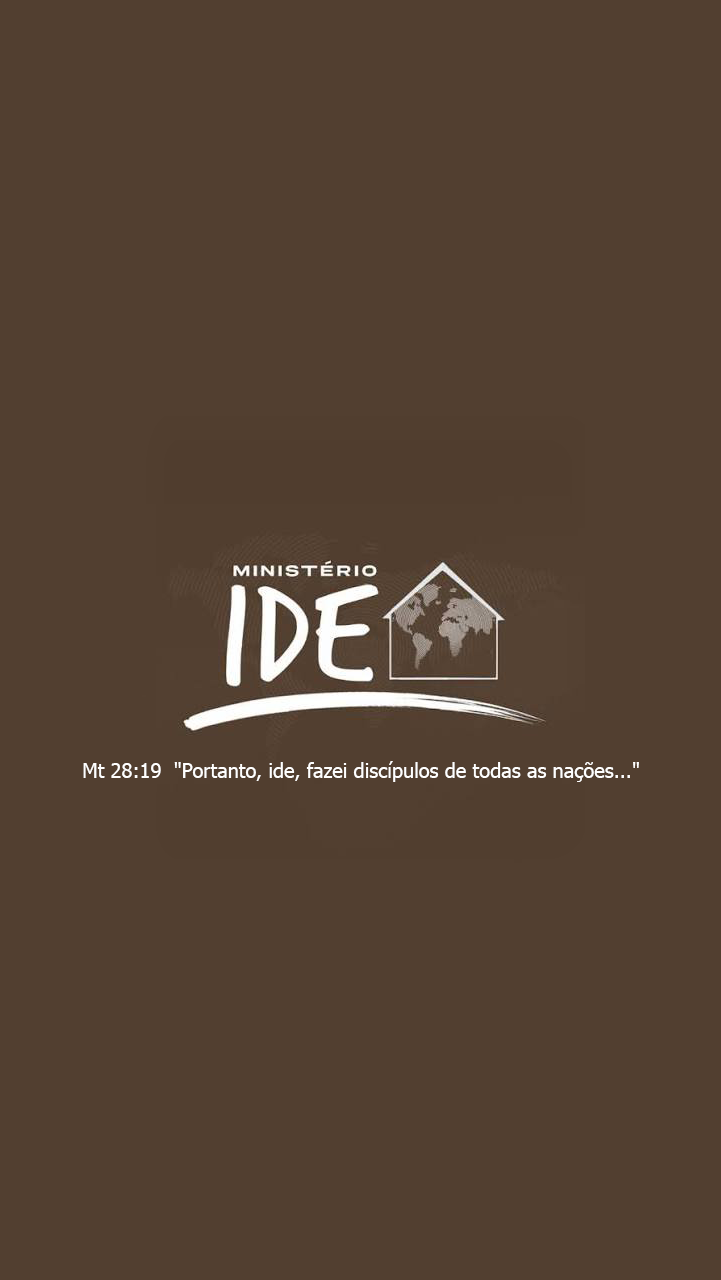
<style>
.page{position:relative;width:721px;height:1280px;background:#523f30}
.page>*{position:absolute;margin:0}
.t1{font:20px "Tahoma";color:#ffffff}
</style>
<div class="page">
<p class="t1" style="left:83px;top:761px;width:556px;height:21px">Mt 28:19  "Portanto, ide, fazei discípulos de todas as nações..."</p>
</div>
